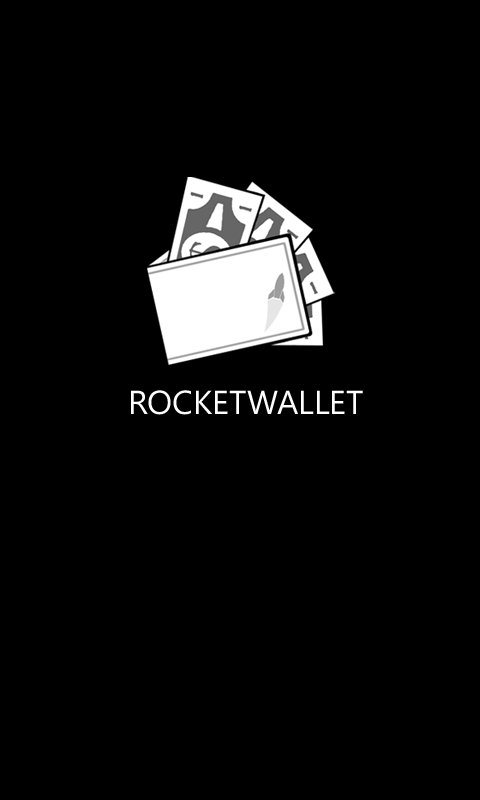
<style>
.page{position:relative;width:480px;height:800px;background:#000000}
.page>*{position:absolute;margin:0}
.t1{font:33.2px "SegoeWP";color:#ffffff}
</style>
<div class="page">
<p class="t1" style="left:131px;top:390px;width:232px;height:25px">ROCKETWALLET</p>
</div>
